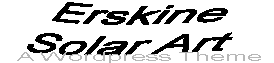
<style>
.page{position:relative;width:274px;height:63px;background:#ffffff}
.page>*{position:absolute;margin:0}
.t1{font:33.9px "ArialMT";color:#000000;scale:1.37 1}
</style>
<div class="page">
<p class="t1" style="left:27px;top:2px;width:206px;height:54px;rotate:9deg">Erskine Solar Art</p>
</div>
